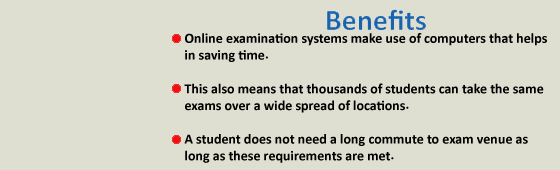
<style>
.page{position:relative;width:560px;height:170px;background:#dfdfd1}
.page>*{position:absolute;margin:0}
.t1{font:14px "Calibri-Bold";color:#000000}
</style>
<div class="page">
<p class="t1" style="left:184px;top:33px;width:363px;height:130px">Online examination systems make use of computers that helps <br>in saving time.<br><br>This also means that thousands of students can take the same <br>exams over a wide spread of locations.<br><br>A student does not need a long commute to exam venue as <br>long as these requirements are met.</p>
</div>
